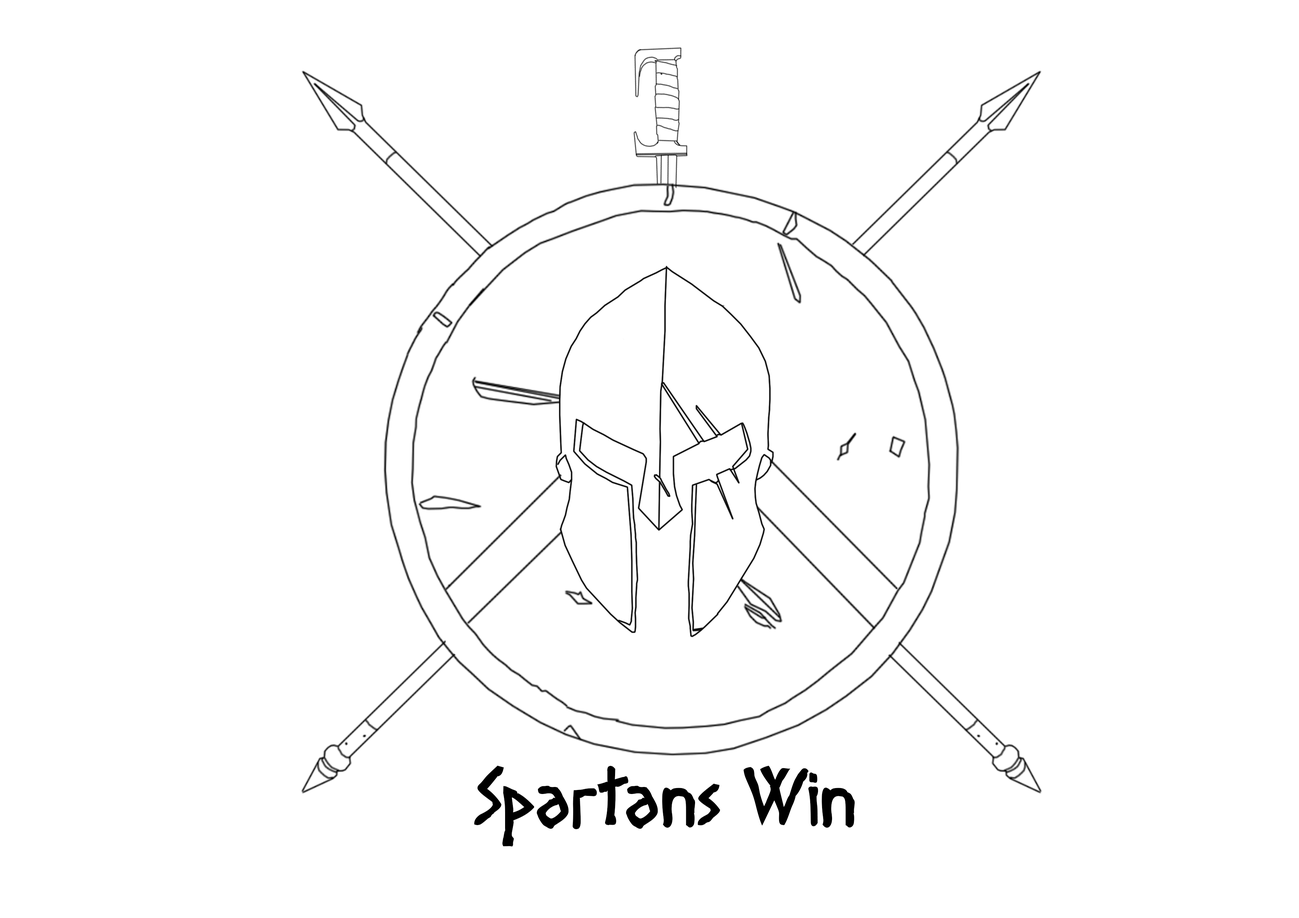
<style>
.page{position:relative;width:1299px;height:918px;background:#ffffff}
.page>*{position:absolute;margin:0}
.t1{font:74px "Diogenes";color:#000000}
</style>
<div class="page">
<p class="t1" style="left:474px;top:766px;width:380px;height:81px">Spartans Win</p>
</div>
